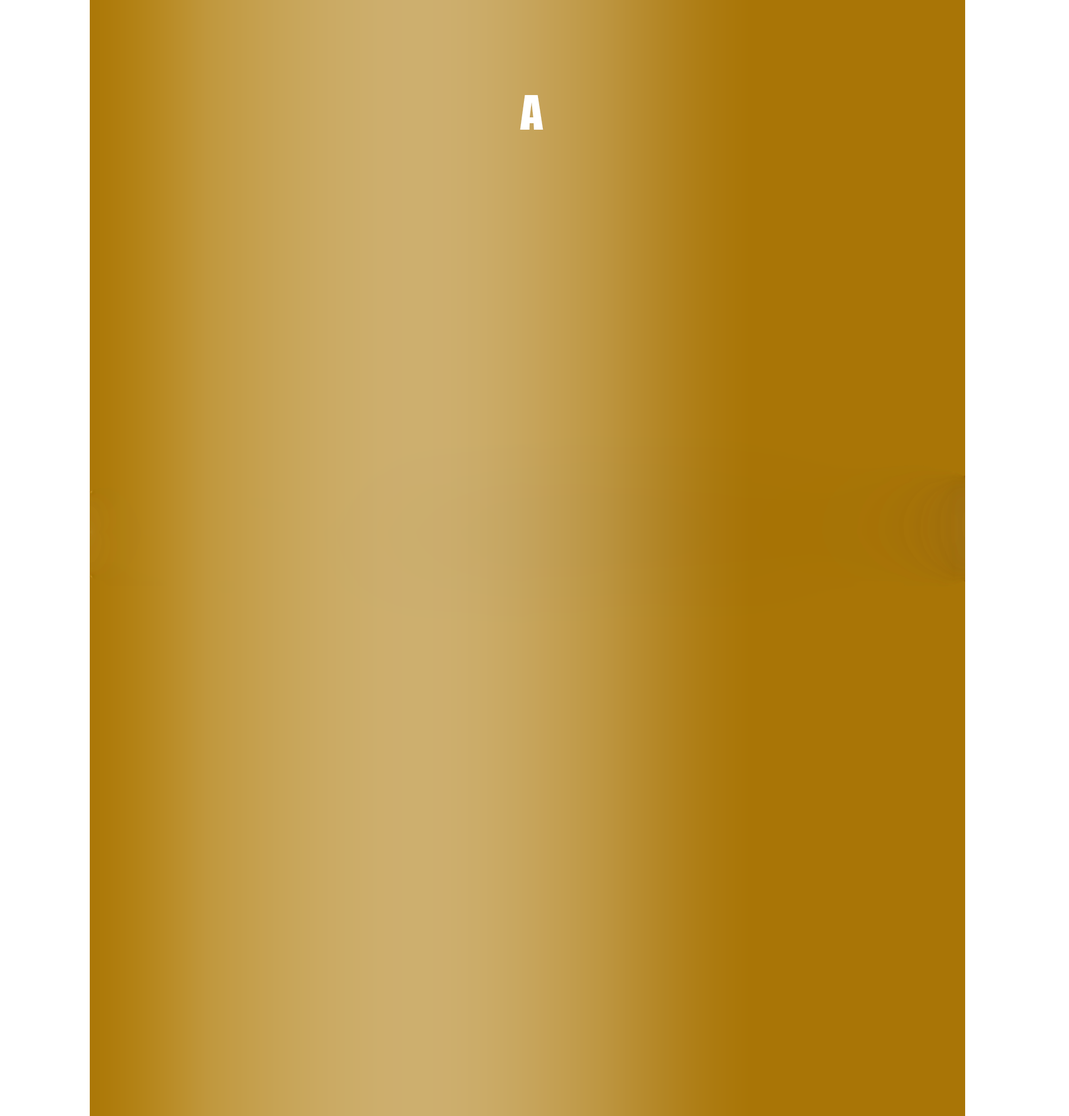
<style>
.page{position:relative;width:1069px;height:1116px}
.page>*{position:absolute;margin:0}
.t1{font:44px "Impact";color:#ffffff}
</style>
<div class="page">
<p class="t1" style="left:520px;top:95px;width:23px;height:35px">A</p>
</div>
